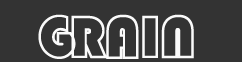
<style>
.page{position:relative;width:242px;height:62px;background:#333333}
.page>*{position:absolute;margin:0}
.t1{font:60px "STCaiyun";color:#fafafa}
</style>
<div class="page">
<p class="t1" style="left:38px;top:14px;width:156px;height:45px">GRAIN</p>
</div>
